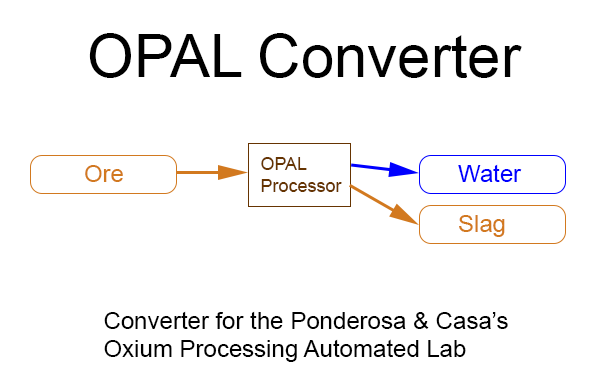
<style>
.page{position:relative;width:613px;height:386px;background:#ffffff}
.page>*{position:absolute;margin:0}
.t1{font:60px "ArialMT";color:#000000}
.t2{font:18px "ArialMT";color:#663401}
.t3{font:24px "ArialMT";color:#d2791f}
.t4{font:24px "ArialMT";color:#0000ff}
.t5{font:24px "ArialMT";color:#000000}
</style>
<div class="page">
<p class="t1" style="left:89px;top:33px;width:433px;height:45px">OPAL Converter</p>
<p class="t2" style="left:261px;top:157px;width:81px;height:35px">OPAL<br>Processor</p>
<p class="t3" style="left:85px;top:165px;width:38px;height:17px">Ore</p>
<p class="t4" style="left:458px;top:164px;width:64px;height:18px">Water</p>
<p class="t3" style="left:459px;top:215px;width:46px;height:22px">Slag</p>
<p class="t5" style="left:104px;top:311px;width:404px;height:51px">Converter for the Ponderosa &amp; Casa’s<br>Oxium Processing Automated Lab</p>
</div>
